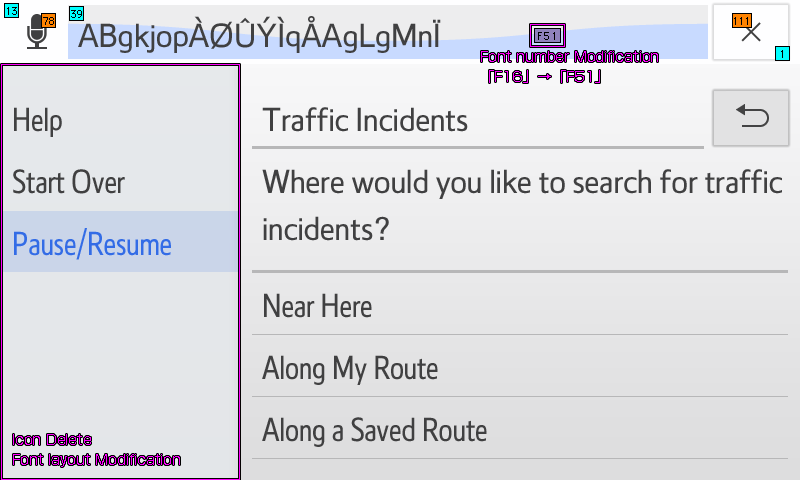
<style>
.page{position:relative;width:800px;height:480px}
.page>*{position:absolute;margin:0}
.t1{font:30px "Tfont1502_T1S";color:#404041}
.t2{font:14px/20px "ShinGoPro-Regular";color:#ff00ff}
.t3{font:30px "Tfont1502_T2S";color:#404041}
.t4{font:30px/62px "Tfont1502_T1S";color:#404040}
.t5{font:30px/47px "Tfont1502_T1S";color:#404040}
.t6{font:30px "Tfont1502_T2S";color:#336ce6}
.t7{font:30px/62px "Tfont1502_T2S";color:#404040}
</style>
<div class="page">
<p class="t1" style="left:78px;top:16px;width:363px;height:37px">ABgkjopÀØÛÝÌqÅAgLgMnÏ</p>
<p class="t2" style="left:481px;top:51px;width:177px;height:32px">Font number Modification<br>「F16」→「F51」</p>
<p class="t3" style="left:14px;top:107px;width:48px;height:30px">Help</p>
<p class="t4" style="left:262px;top:107px;width:520px;height:134px">Traffic Incidents<br>Where would you like to search for traffic<br><span class="t5">incidents?</span></p>
<p class="t3" style="left:13px;top:169px;width:112px;height:25px">Start Over</p>
<p class="t6" style="left:14px;top:228px;width:157px;height:32px">Pause/Resume</p>
<p class="t7" style="left:262px;top:293px;width:225px;height:154px">Near Here<br>Along My Route<br>Along a Saved Route</p>
<p class="t2" style="left:13px;top:434px;width:167px;height:33px">Icon Delete<br>Font layout Modification</p>
</div>
